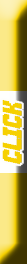
<style>
.page{position:relative;width:27px;height:264px}
.page>*{position:absolute;margin:0}
.t1{font:20.8px "Abduction2000";color:#f6d000}
</style>
<div class="page">
<p class="t1" style="left:2px;top:99px;width:20px;height:66px;rotate:-90deg">click</p>
</div>
